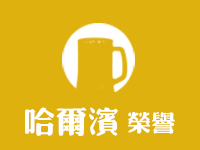
<style>
.page{position:relative;width:200px;height:150px;background:#dfb10f}
.page>*{position:absolute;margin:0}
.t1{font:31.2px "¾­µä·±·ÂÔ² Regular";color:#ffffff}
.t2{font:23.7px "¾­µä·±·ÂÔ² Regular";color:#ffffff}
</style>
<div class="page">
<p class="t1" style="left:25px;top:107px;width:93px;height:29px">哈尔滨</p>
<p class="t2" style="left:128px;top:112px;width:47px;height:22px">荣誉</p>
</div>
